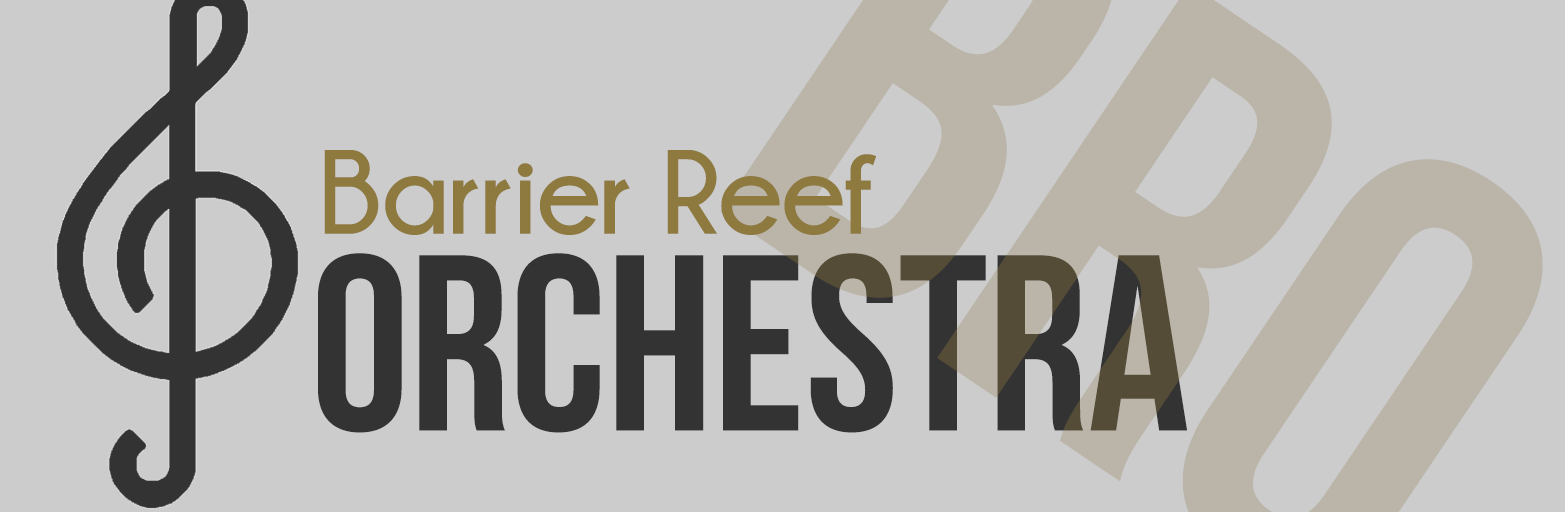
<style>
.page{position:relative;width:1565px;height:512px;background:#cccccc}
.page>*{position:absolute;margin:0}
.t1{font:118.7px "Champagne&Limousines-Bold";color:#8e793e}
.t2{font:250px "BebasNeue";color:#231f20}
</style>
<div class="page">
<p class="t1" style="left:324px;top:150px;width:552px;height:85px">Barrier Reef</p>
<p class="t2" style="left:318px;top:253px;width:869px;height:180px">Orchestra</p>
</div>
